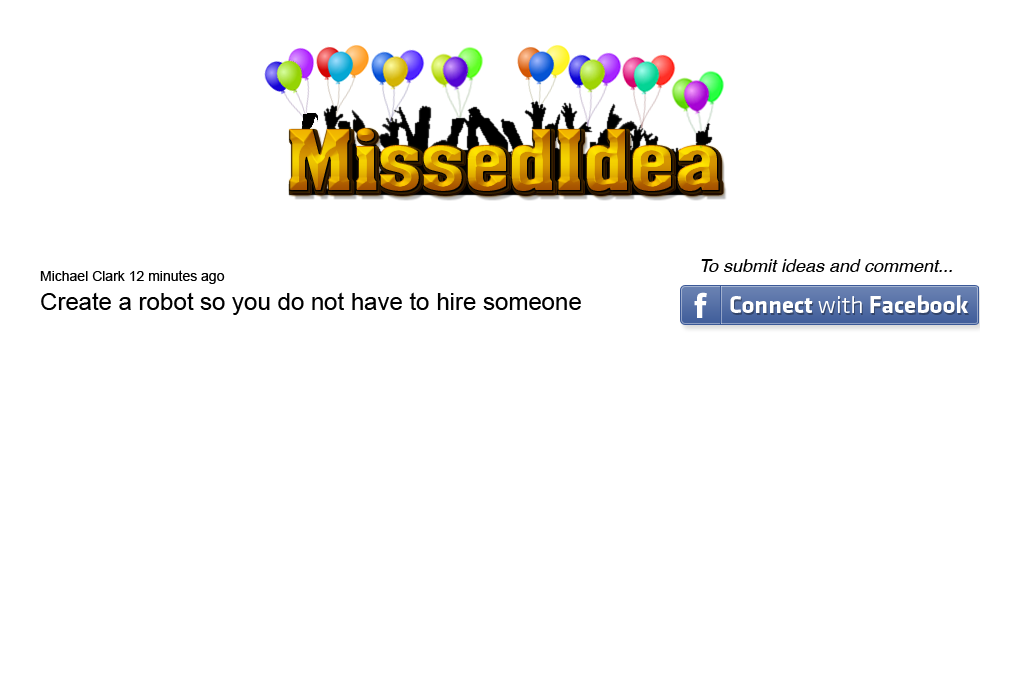
<style>
.page{position:relative;width:1020px;height:700px;background:#ffffff}
.page>*{position:absolute;margin:0}
.t1{font:72px "AachenStd-Bold"}
.t2{font:24px "ArialMT";color:#000000}
.t3{font:14px "ArialMT";color:#000000}
.t4{font:18px "Helvetica-Oblique";color:#000000}
</style>
<div class="page">
<p class="t1" style="left:289px;top:128px;width:431px;height:64px">MissedIdea</p>
<p class="t1" style="left:291px;top:130px;width:431px;height:64px">MissedIdea</p>
<p class="t2" style="left:40px;top:270px;width:541px;height:45px"><span class="t3">Michael Clark 12 minutes ago<br></span>Create a robot so you do not have to hire someone</p>
<p class="t4" style="left:701px;top:259px;width:251px;height:13px">To submit ideas and comment...</p>
</div>
